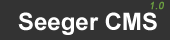
<style>
.page{position:relative;width:170px;height:40px;background:#333333}
.page>*{position:absolute;margin:0}
.t1{font:10px "ArialMT";color:#6b9f40;font-weight:bold;font-style:italic}
.t2{font:24px "Arial-BoldMT";color:#ffffff}
</style>
<div class="page">
<p class="t1" style="left:150px;top:1px;width:14px;height:9px">1.0</p>
<p class="t2" style="left:18px;top:12px;width:139px;height:23px">Seeger CMS</p>
</div>
